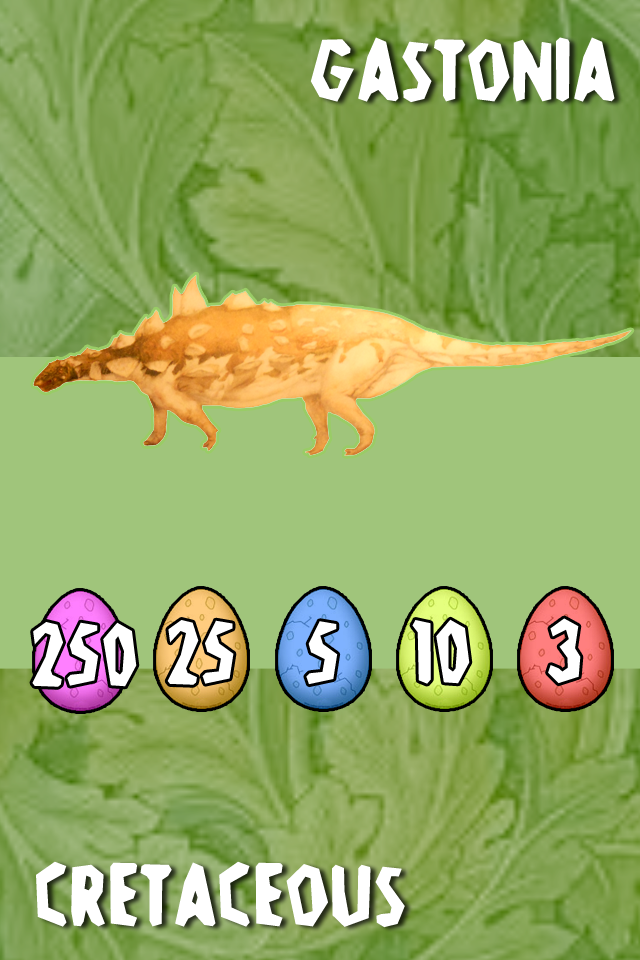
<style>
.page{position:relative;width:640px;height:960px;background:#a0c57b}
.page>*{position:absolute;margin:0}
.t1{font:96px "Stone-Age";color:#ffffff}
</style>
<div class="page">
<p class="t1" style="left:310px;top:37px;width:305px;height:66px">Gastonia</p>
<p class="t1" style="left:32px;top:622px;width:105px;height:65px">250</p>
<p class="t1" style="left:167px;top:620px;width:67px;height:65px">25</p>
<p class="t1" style="left:306px;top:621px;width:32px;height:64px">5</p>
<p class="t1" style="left:412px;top:619px;width:58px;height:65px">10</p>
<p class="t1" style="left:548px;top:618px;width:33px;height:66px">3</p>
<p class="t1" style="left:36px;top:861px;width:369px;height:67px">Cretaceous</p>
</div>
